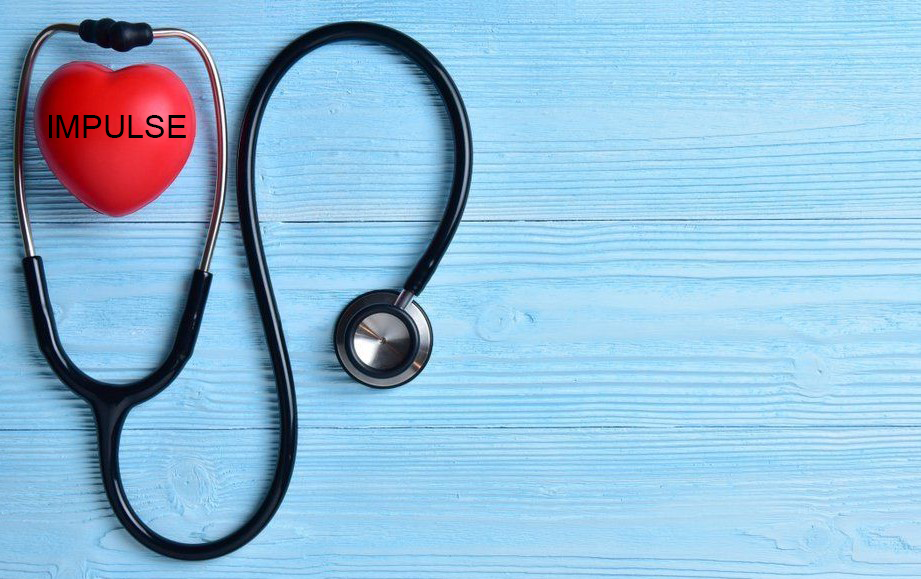
<style>
.page{position:relative;width:921px;height:579px}
.page>*{position:absolute;margin:0}
.t1{font:36px "Vrinda";color:#000000}
</style>
<div class="page">
<p class="t1" style="left:49px;top:115px;width:137px;height:23px">IMPULSE</p>
</div>
